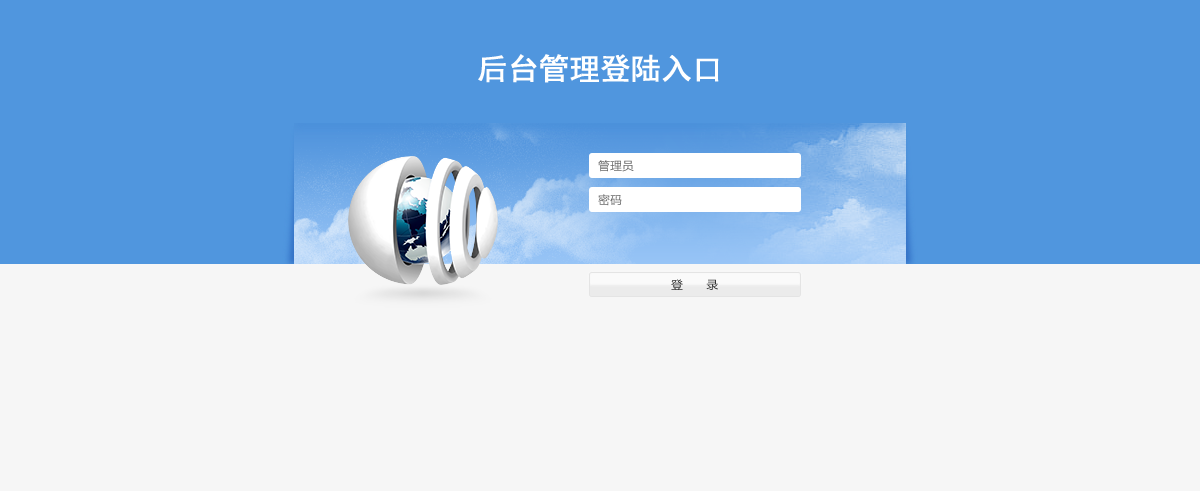
<style>
.page{position:relative;width:1200px;height:491px;background:#f6f6f6}
.page>*{position:absolute;margin:0}
.t1{font:30px "SimHei";color:#ffffff;font-weight:bold}
.t2{font:12px "FZLTHJW--GB1-0";color:#666666}
.t3{font:12px "FZLTHJW--GB1-0";color:#323232}
</style>
<div class="page">
<p class="t1" style="left:478px;top:54px;width:241px;height:29px">后台管理登陆入口</p>
<p class="t2" style="left:598px;top:160px;width:36px;height:12px">管理员</p>
<p class="t2" style="left:598px;top:194px;width:24px;height:12px">密码</p>
<p class="t3" style="left:671px;top:279px;width:47px;height:11px">登       录</p>
</div>
